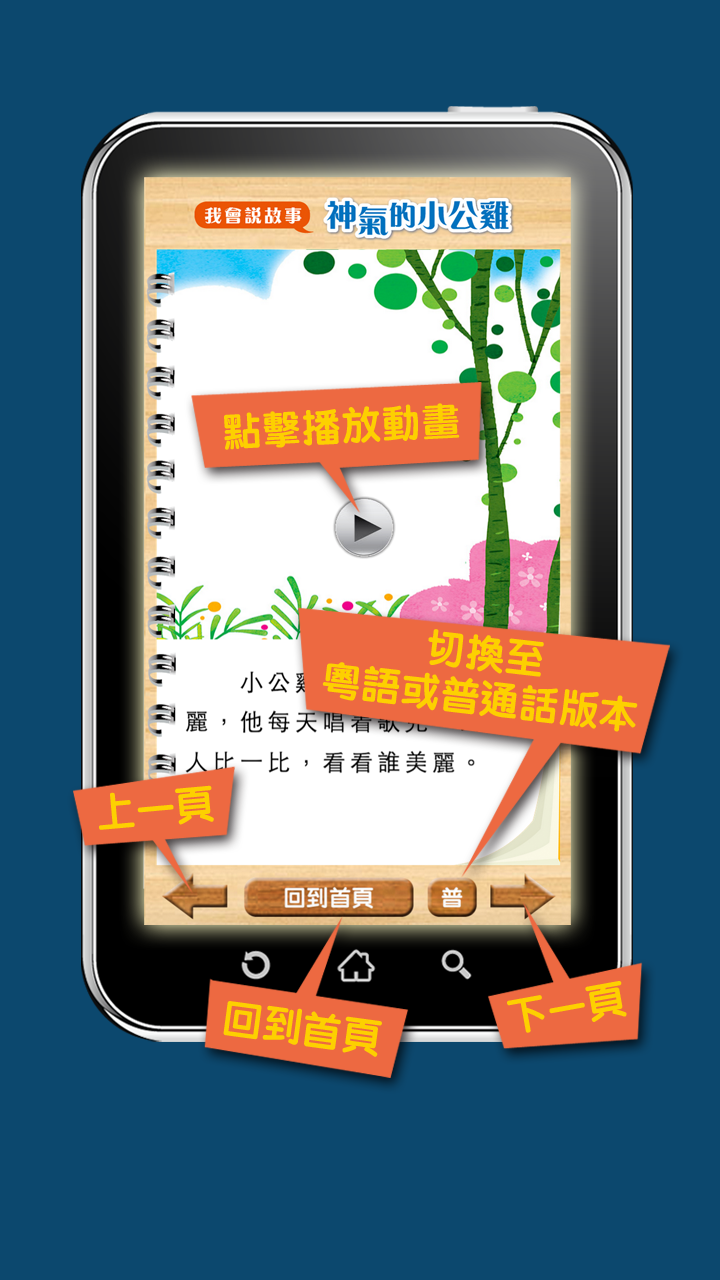
<style>
.page{position:relative;width:720px;height:1280px;background:#0c486e}
.page>*{position:absolute;margin:0}
.t1{font:39.8px "MYuenHK-Xbold";color:#fdd000}
.t2{font:39.8px/44.5px "MYuenHK-Xbold";color:#fdd000}
</style>
<div class="page">
<p class="t1" style="left:224px;top:403px;width:236px;height:47px;rotate:-3deg">點擊播放動畫</p>
<p class="t2" style="left:322px;top:629px;width:316px;height:103px;text-align:center;rotate:7deg">切換至<br>粵語或普通話版本</p>
<p class="t1" style="left:99px;top:785px;width:115px;height:45px;rotate:-5deg">上一頁</p>
<p class="t1" style="left:507px;top:981px;width:120px;height:52px;rotate:-10deg">下一頁</p>
<p class="t1" style="left:223px;top:1001px;width:159px;height:56px;rotate:8deg">回到首頁</p>
</div>
